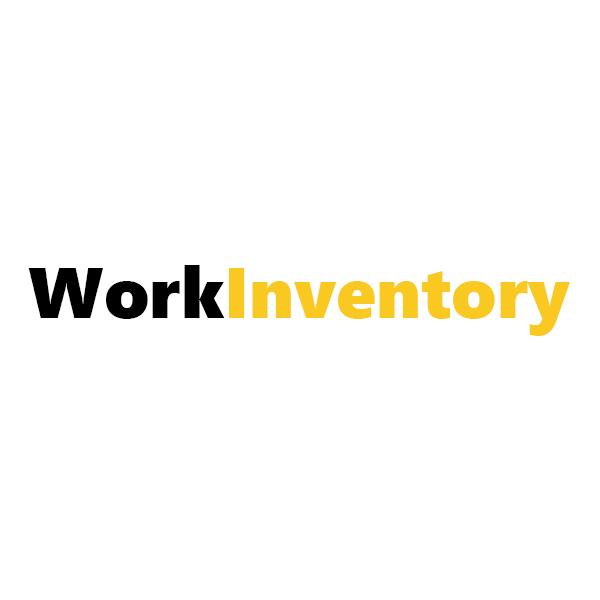
<style>
.page{position:relative;width:600px;height:600px;background:#ffffff}
.page>*{position:absolute;margin:0}
.t1{font:72px "SegoeUIBlack";color:#f9c922}
.t2{font:72px "SegoeUIBlack";color:#000000}
</style>
<div class="page">
<p class="t1" style="left:28px;top:265px;width:542px;height:71px"><span class="t2">Work</span>Inventory</p>
</div>
